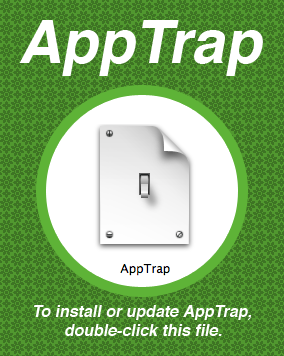
<style>
.page{position:relative;width:284px;height:356px;background:#3e7424}
.page>*{position:absolute;margin:0}
.t1{font:60px "Helvetica-Bold";color:#ffffff;font-style:italic}
.t2{font:16px "Helvetica-Bold";color:#ffffff;font-style:italic}
</style>
<div class="page">
<p class="t1" style="left:19px;top:20px;width:244px;height:56px">AppTrap</p>
<p class="t2" style="left:34px;top:305px;width:218px;height:31px;text-align:center">To install or update AppTrap,<br>double-click this file.</p>
</div>
